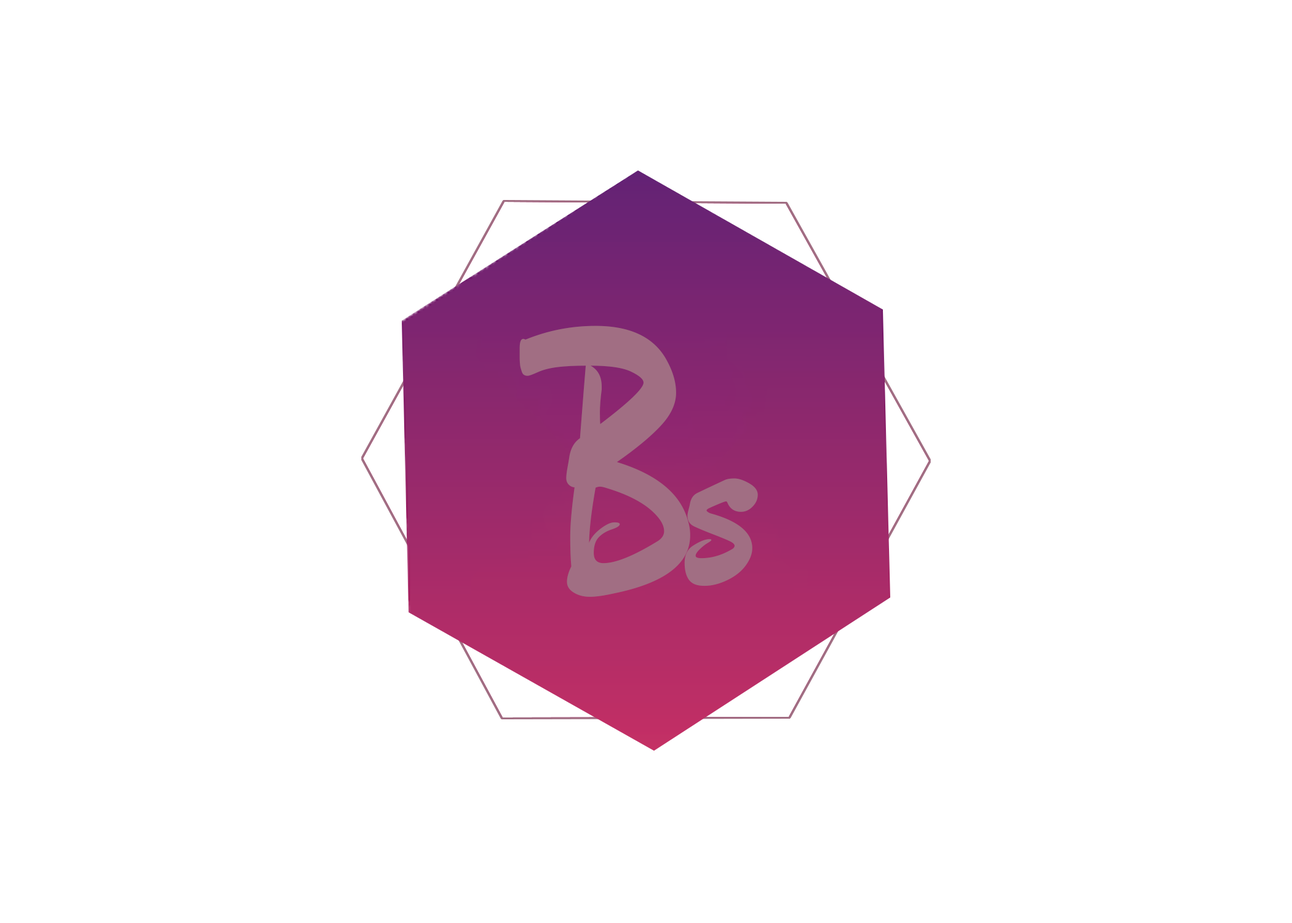
<style>
.page{position:relative;width:1292px;height:923px;background:#ffffff}
.page>*{position:absolute;margin:0}
.t1{font:361.1px "ZhiMangXing-Regular";letter-spacing:-0.04em;color:#a16e83}
.t2{font:238px "ZhiMangXing-Regular";letter-spacing:-0.04em;color:#a16e83}
</style>
<div class="page">
<p class="t1" style="left:519px;top:325px;width:239px;height:272px">B<span class="t2">s</span></p>
</div>
